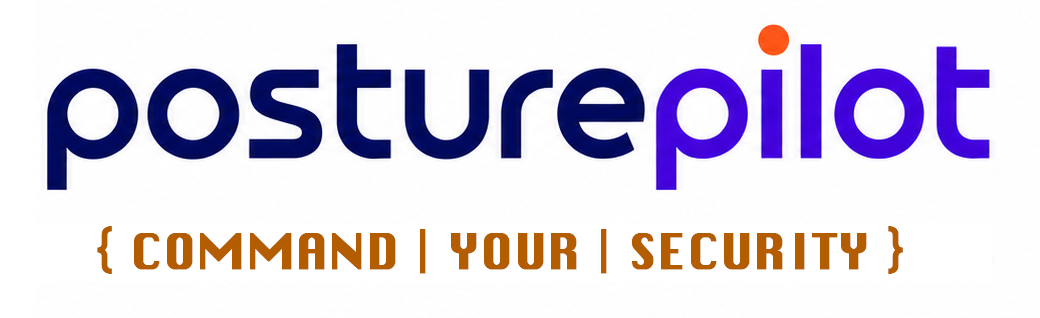
<style>
.page{position:relative;width:1040px;height:318px;background:#fefefe}
.page>*{position:absolute;margin:0}
.t1{font:48px "Silom";color:#b35d00;font-weight:bold}
.t2{font:52px "Silom";color:#b35d00;font-weight:bold}
</style>
<div class="page">
<p class="t1" style="left:97px;top:226px;width:806px;height:48px"><span class="t2">{</span> COMMAND | YOUR | SECURITY <span class="t2">}</span></p>
</div>
